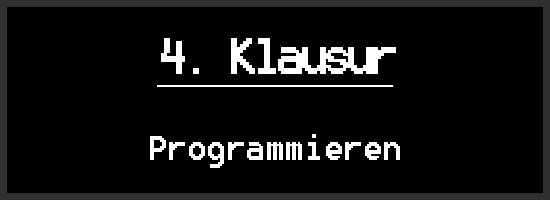
<style>
.page{position:relative;width:550px;height:200px;background:#000000}
.page>*{position:absolute;margin:0}
.t1{font:50px "8514oem";color:#ffffff;text-decoration:underline}
.t2{font:41.7px "8514oem";color:#ffffff}
</style>
<div class="page">
<p class="t1" style="left:157px;top:38px;width:239px;height:49px">4. Klausur</p>
<p class="t2" style="left:150px;top:134px;width:250px;height:34px">Programmieren</p>
</div>
